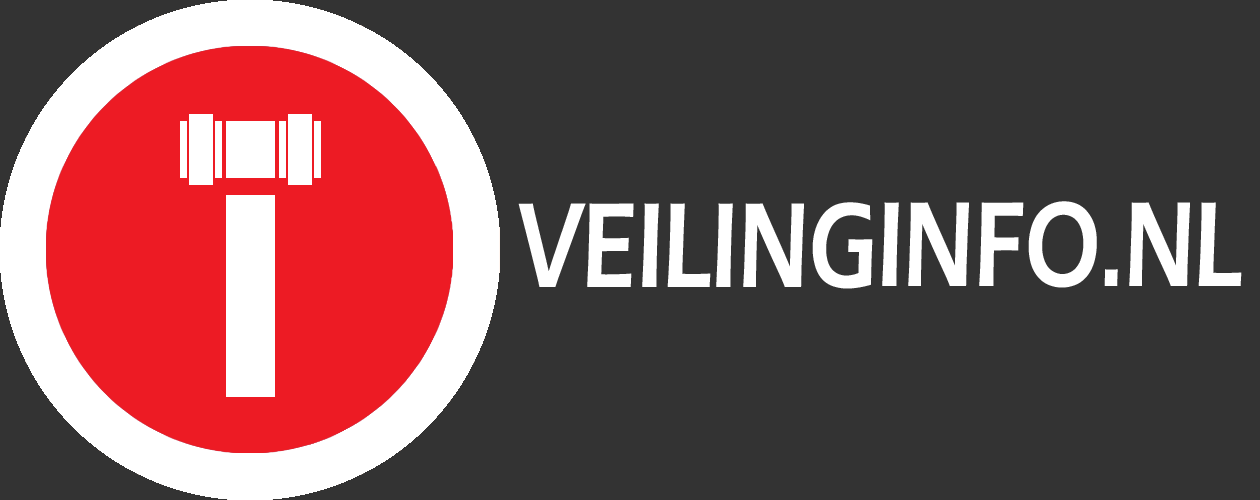
<style>
.page{position:relative;width:1260px;height:500px;background:#333333}
.page>*{position:absolute;margin:0}
.t1{font:124.6px "ErasITC-Demi";color:#ffffff;text-transform:uppercase;scale:0.72 1}
</style>
<div class="page">
<p class="t1" style="left:518px;top:201px;width:724px;height:88px">veilinginfo.nl</p>
</div>
